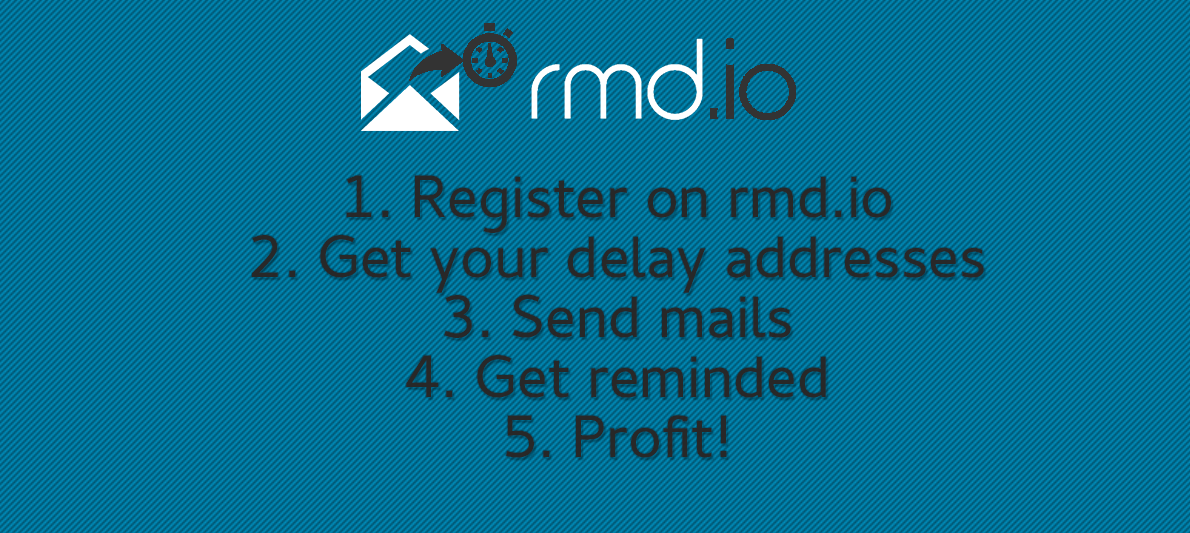
<style>
.page{position:relative;width:1190px;height:533px}
.page>*{position:absolute;margin:0}
.t1{font:60px/10px "Cantarell-Regular";color:#282828}
</style>
<div class="page">
<p class="t1" style="left:252px;top:175px;width:732px;height:283px;text-align:center">1. Register on rmd.io<br><br><br><br><br><br>2. Get your delay addresses<br><br><br><br><br><br>3. Send mails<br><br><br><br><br><br>4. Get reminded<br><br><br><br><br><br>5. Profit!</p>
</div>
